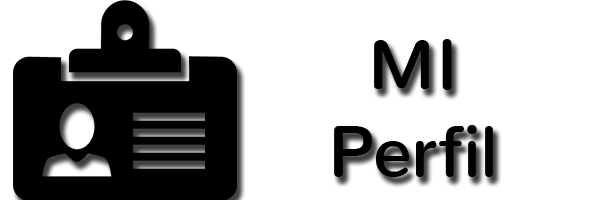
<style>
.page{position:relative;width:600px;height:200px;background:#ffffff}
.page>*{position:absolute;margin:0}
.t1{font:72px "Nunito-SemiBold";color:#000000}
</style>
<div class="page">
<p class="t1" style="left:334px;top:39px;width:159px;height:138px;text-align:center">MI<br>Perfil</p>
</div>
